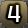
<style>
.page{position:relative;width:28px;height:28px}
.page>*{position:absolute;margin:0}
.t1{font:24px "CascadiaCode-Roman";letter-spacing:0.015em;color:#ffffff}
</style>
<div class="page">
<p class="t1" style="left:7px;top:5px;width:14px;height:17px">4</p>
</div>
